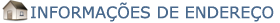
<style>
.page{position:relative;width:280px;height:23px;background:#ffffff}
.page>*{position:absolute;margin:0}
.t1{font:16px "Verdana";color:#49698d}
</style>
<div class="page">
<p class="t1" style="left:31px;top:2px;width:243px;height:20px">INFORMAÇÕES DE ENDEREÇO</p>
</div>
